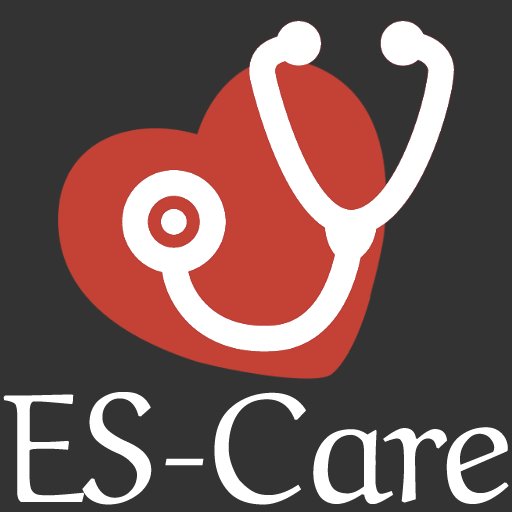
<style>
.page{position:relative;width:512px;height:512px;background:#333333}
.page>*{position:absolute;margin:0}
.t1{font:156px "ArefRuqaa-Regular";color:#ffffff}
</style>
<div class="page">
<p class="t1" style="left:3px;top:392px;width:506px;height:113px">ES-Care</p>
</div>
